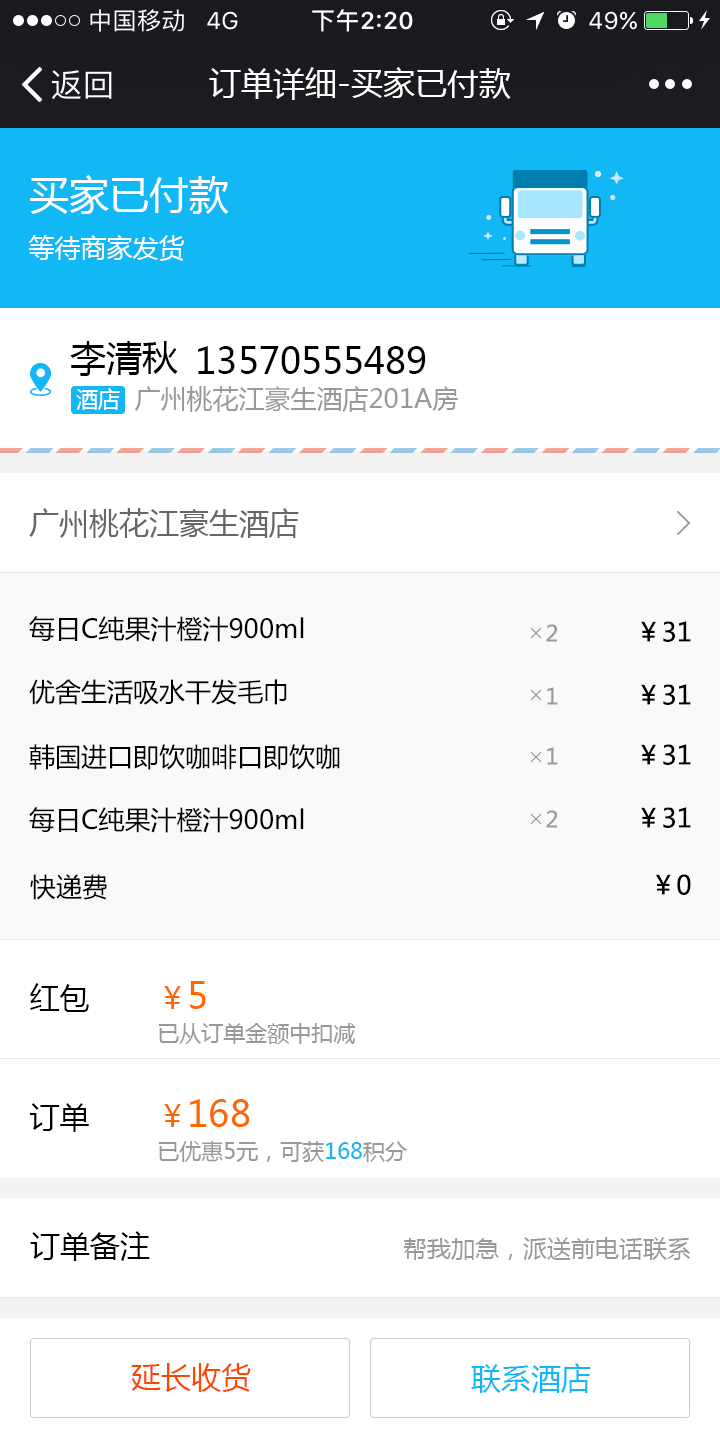
<style>
.page{position:relative;width:720px;height:1438px;background:#ffffff}
.page>*{position:absolute;margin:0}
.t1{font:32px "MicrosoftYaHei";color:#ffffff}
.t2{font:26px/36px "MicrosoftYaHei";color:#ffffff}
.t3{font:40px/60px "MicrosoftYaHei";color:#ffffff}
.t4{font:36px "MicrosoftYaHei";color:#000000}
.t5{font:22px "MicrosoftYaHei";color:#ffffff}
.t6{font:26px "MicrosoftYaHei";color:#999999}
.t7{font:30px "MicrosoftYaHei";color:#666666}
.t8{font:26px "MicrosoftYaHei";color:#000000}
.t9{font:22px "MicrosoftYaHei";color:#999999}
.t10{font:30px "MicrosoftYaHei";color:#000000}
.t11{font:22px/44px "MicrosoftYaHei";color:#999999}
.t12{font:30px/44px "MicrosoftYaHei";color:#ff6600}
.t13{font:36px/44px "MicrosoftYaHei";color:#ff6600}
.t14{font:22px/44px "MicrosoftYaHei";color:#12b7f5}
.t15{font:24px "MicrosoftYaHei";color:#999999}
.t16{font:30px "MicrosoftYaHei";color:#ff4400}
.t17{font:30px "MicrosoftYaHei";color:#12b7f5}
</style>
<div class="page">
<p class="t1" style="left:209px;top:67px;width:302px;height:33px">订单详细-买家已付款</p>
<p class="t2" style="left:28px;top:175px;width:201px;height:86px"><span class="t3">买家已付款<br></span>等待商家发货</p>
<p class="t4" style="left:70px;top:341px;width:108px;height:35px">李清秋</p>
<p class="t4" style="left:198px;top:346px;width:228px;height:28px">13570555489</p>
<p class="t5" style="left:76px;top:388px;width:44px;height:22px">酒店</p>
<p class="t6" style="left:134px;top:386px;width:324px;height:26px">广州桃花江豪生酒店201A房</p>
<p class="t7" style="left:29px;top:508px;width:270px;height:30px">广州桃花江豪生酒店</p>
<p class="t8" style="left:29px;top:616px;width:275px;height:26px">每日C纯果汁橙汁900ml</p>
<p class="t9" style="left:546px;top:624px;width:11px;height:18px">2</p>
<p class="t8" style="left:641px;top:621px;width:50px;height:21px">￥31</p>
<p class="t8" style="left:29px;top:679px;width:258px;height:26px">优舍生活吸水干发毛巾</p>
<p class="t9" style="left:547px;top:687px;width:11px;height:18px">1</p>
<p class="t8" style="left:641px;top:684px;width:50px;height:21px">￥31</p>
<p class="t8" style="left:29px;top:744px;width:311px;height:26px">韩国进口即饮咖啡口即饮咖</p>
<p class="t9" style="left:547px;top:747px;width:11px;height:18px">1</p>
<p class="t8" style="left:641px;top:744px;width:50px;height:21px">￥31</p>
<p class="t8" style="left:29px;top:807px;width:275px;height:26px">每日C纯果汁橙汁900ml</p>
<p class="t8" style="left:641px;top:807px;width:50px;height:21px">￥31</p>
<p class="t9" style="left:546px;top:810px;width:11px;height:18px">2</p>
<p class="t8" style="left:30px;top:874px;width:77px;height:26px">快递费</p>
<p class="t8" style="left:656px;top:874px;width:35px;height:21px">￥0</p>
<p class="t10" style="left:30px;top:983px;width:59px;height:29px">红包</p>
<p class="t11" style="left:158px;top:981px;width:198px;height:63px"><span class="t12">￥</span><span class="t13">5<br></span>已从订单金额中扣减</p>
<p class="t10" style="left:30px;top:1103px;width:59px;height:29px">订单</p>
<p class="t11" style="left:158px;top:1099px;width:249px;height:63px"><span class="t12">￥</span><span class="t13">168<br></span>已优惠5元，可获<span class="t14">168</span>积分</p>
<p class="t10" style="left:30px;top:1231px;width:120px;height:30px">订单备注</p>
<p class="t15" style="left:403px;top:1237px;width:288px;height:23px">帮我加急，派送前电话联系</p>
<p class="t16" style="left:131px;top:1363px;width:120px;height:29px">延长收货</p>
<p class="t17" style="left:471px;top:1363px;width:120px;height:30px">联系酒店</p>
</div>
